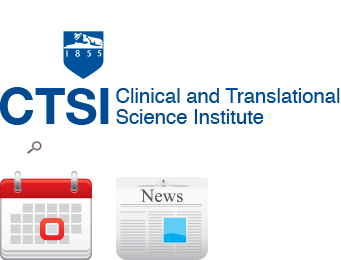
<style>
.page{position:relative;width:341px;height:260px;background:#ffffff}
.page>*{position:absolute;margin:0}
.t1{font:50.3px "HelveticaNeue-Bold";color:#004a92}
.t2{font:20.5px/20.5px "Helvetica";color:#004a92}
</style>
<div class="page">
<p class="t1" style="left:0px;top:87px;width:109px;height:38px">CTSI</p>
<p class="t2" style="left:116px;top:88px;width:224px;height:36px">Clinical and Translational<br>Science Institute</p>
</div>
